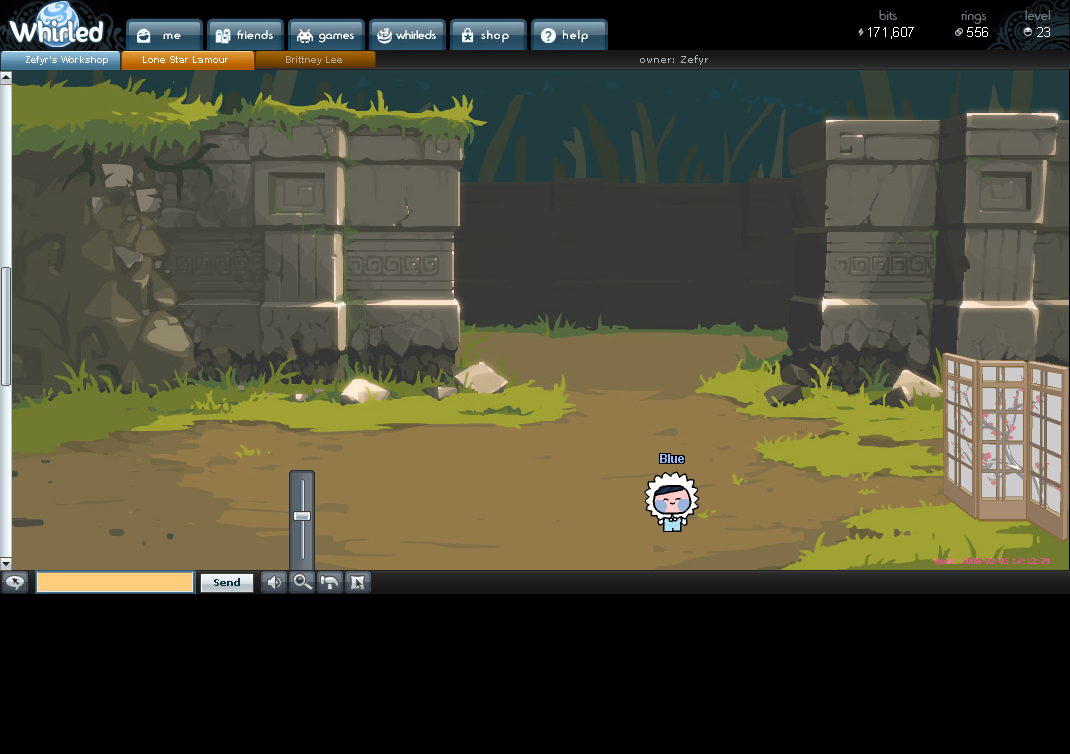
<style>
.page{position:relative;width:1070px;height:754px;background:#000000}
.page>*{position:absolute;margin:0}
.t1{font:14px "BlippoLightSF";letter-spacing:0.015em;color:#6a787c}
.t2{font:22.8px "SunnySide";color:#ffffff}
.t3{font:12px "BlippoLightSF";letter-spacing:0.1em;color:#ffffff;scale:1.07 1}
.t4{font:12px "BlippoLightSF";letter-spacing:0.05em;color:#ffffff;scale:1.07 1}
.t5{font:12px "BlippoLightSF";letter-spacing:0.025em;color:#ffffff;scale:1.07 1}
.t6{font:12px "BlippoLightSF";color:#ffffff;scale:1.07 1}
.t7{font:13px "ArialMT";letter-spacing:0.025em;color:#ffffff}
.t8{font:10px "Arial-BoldMT";color:#ffffff}
.t9{font:10px "Arial-BoldMT";color:#b2a696}
</style>
<div class="page">
<p class="t1" style="left:879px;top:10px;width:172px;height:14px">bits               rings         level</p>
<p class="t2" style="left:9px;top:20px;width:94px;height:22px">Whirled</p>
<p class="t2" style="left:9px;top:20px;width:94px;height:22px">Whirled</p>
<p class="t3" style="left:163px;top:30px;width:425px;height:13px">me               <span class="t4">friends             </span><span class="t5">games            </span><span class="t6">whirleds             </span>shop               help</p>
<p class="t3" style="left:163px;top:30px;width:425px;height:13px">me               <span class="t4">friends             </span><span class="t5">games            </span><span class="t6">whirleds             </span>shop               help</p>
<p class="t7" style="left:868px;top:27px;width:182px;height:12px">171,607            556           23</p>
<p class="t8" style="left:26px;top:56px;width:82px;height:9px">Zefyr’s Workshop</p>
<p class="t8" style="left:143px;top:56px;width:85px;height:7px">Lone Star Lamour</p>
<p class="t9" style="left:286px;top:56px;width:56px;height:9px">Brittney Lee</p>
</div>
